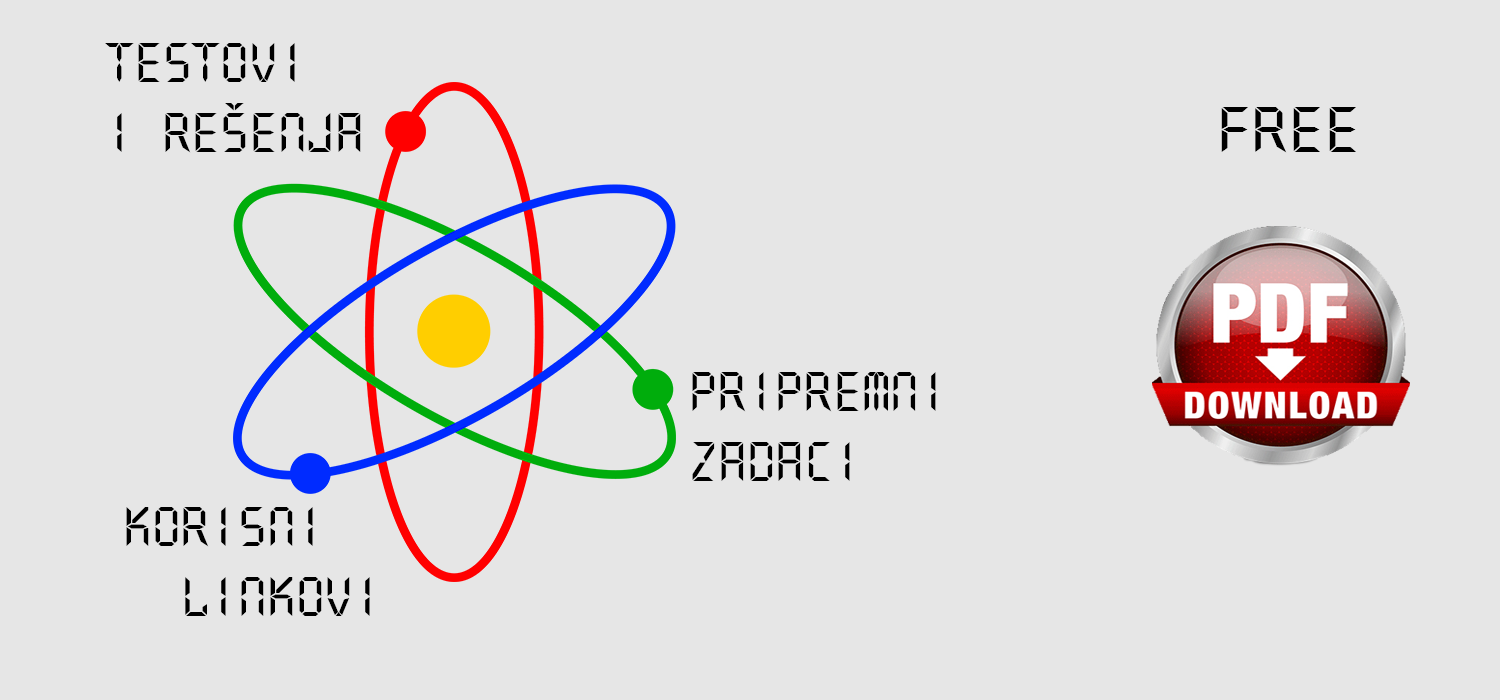
<style>
.page{position:relative;width:1500px;height:700px;background:#e6e6e6}
.page>*{position:absolute;margin:0}
.t1{font:58.3px "Quartz-Regular";color:#000000}
.t2{font:68.2px "Quartz-Regular";color:#000000;scale:1.07 1}
</style>
<div class="page">
<p class="t1" style="left:105px;top:43px;width:256px;height:110px">testovi<br>i rešenja</p>
<p class="t2" style="left:1221px;top:107px;width:135px;height:46px">FREE</p>
<p class="t1" style="left:692px;top:372px;width:244px;height:109px">PRIPREMNI <br>ZADACI</p>
<p class="t1" style="left:126px;top:507px;width:244px;height:109px">korisni<br>  linkovi</p>
</div>
